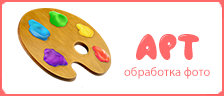
<style>
.page{position:relative;width:224px;height:96px;background:#ffffff}
.page>*{position:absolute;margin:0}
.t1{font:37.3px "Airfool";color:#ff696a}
.t2{font:12.5px "MyriadPro-Regular";color:#ff696a}
</style>
<div class="page">
<p class="t1" style="left:136px;top:34px;width:63px;height:26px">Арт</p>
<p class="t2" style="left:124px;top:67px;width:86px;height:12px">обработка фото</p>
</div>
